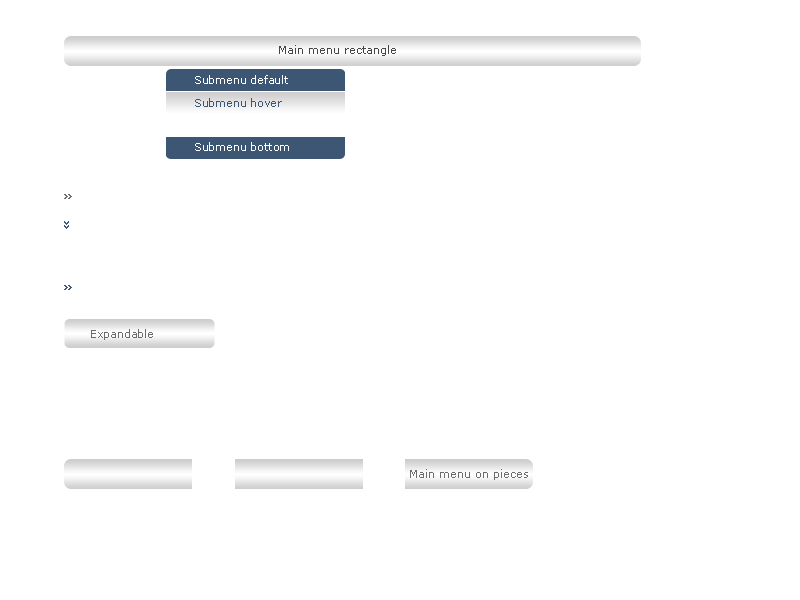
<style>
.page{position:relative;width:800px;height:600px;background:#ffffff}
.page>*{position:absolute;margin:0}
.t1{font:11px "Verdana";color:#454545}
.t2{font:11px "Verdana";color:#ffffff}
.t3{font:11px "Verdana";color:#3c5673}
.t4{font:11px "Verdana";color:#6b6b6b}
</style>
<div class="page">
<p class="t1" style="left:279px;top:45px;width:117px;height:11px">Main menu rectangle</p>
<p class="t2" style="left:195px;top:75px;width:93px;height:9px">Submenu default</p>
<p class="t3" style="left:195px;top:98px;width:87px;height:9px">Submenu hover</p>
<p class="t2" style="left:195px;top:142px;width:94px;height:9px">Submenu bottom</p>
<p class="t4" style="left:91px;top:329px;width:62px;height:11px">Expandable</p>
<p class="t4" style="left:410px;top:469px;width:118px;height:11px">Main menu on pieces</p>
</div>
